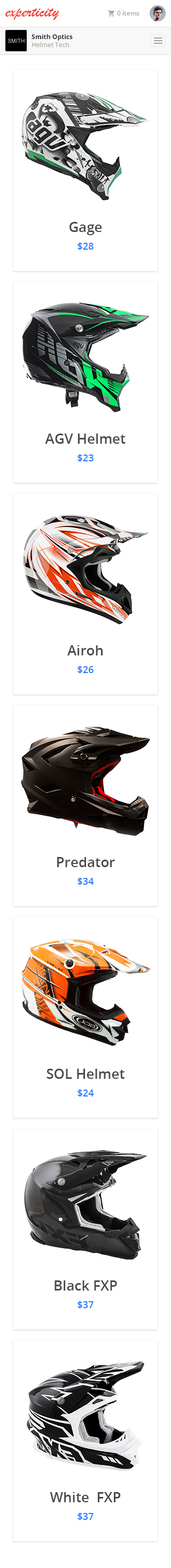
<style>
.page{position:relative;width:171px;height:1568px;background:#ffffff}
.page>*{position:absolute;margin:0}
.t1{font:17.1px "BrushScriptMT";color:#ef4036}
.t2{font:6.4px "OpenSans-Semibold";color:#aea299}
.t3{font:6.4px/8px "OpenSans-Bold";color:#333333}
.t4{font:6.4px/8px "OpenSans";color:#aea299}
.t5{font:13.9px/25.7px "OpenSans-Semibold";color:#4a4a4a}
.t6{font:9.6px/17.6px "OpenSans-Semibold";color:#2579f8}
</style>
<div class="page">
<p class="t1" style="left:5px;top:8px;width:54px;height:12px">experticity</p>
<p class="t2" style="left:117px;top:11px;width:23px;height:5px">0 items</p>
<p class="t3" style="left:32px;top:34px;width:41px;height:14px">Smith Optics<br><span class="t4">Helmet Tech</span></p>
<p class="t5" style="left:69px;top:222px;width:33px;height:28px;text-align:center">Gage<br><span class="t6">$28</span></p>
<p class="t5" style="left:45px;top:433px;width:81px;height:29px;text-align:center">AGV Helmet<br><span class="t6">$23</span></p>
<p class="t5" style="left:67px;top:645px;width:36px;height:29px;text-align:center">Airoh<br><span class="t6">$26</span></p>
<p class="t5" style="left:57px;top:856px;width:58px;height:29px;text-align:center">Predator<br><span class="t6">$34</span></p>
<p class="t5" style="left:47px;top:1068px;width:78px;height:29px;text-align:center">SOL Helmet<br><span class="t6">$24</span></p>
<p class="t5" style="left:55px;top:1280px;width:62px;height:29px;text-align:center">Black FXP<br><span class="t6">$37</span></p>
<p class="t5" style="left:50px;top:1492px;width:71px;height:28px;text-align:center">White  FXP<br><span class="t6">$37</span></p>
</div>
